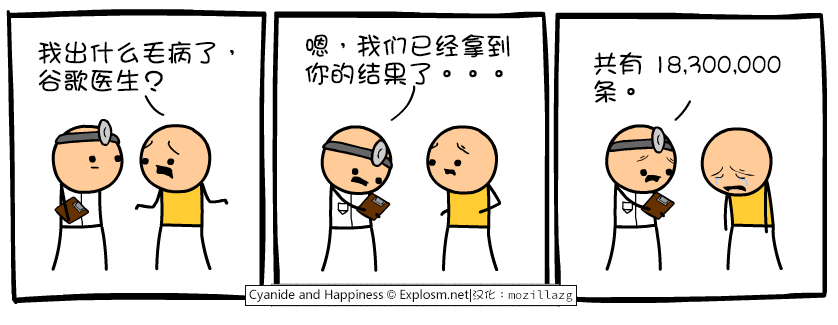
<style>
.page{position:relative;width:838px;height:325px;background:#ffffff}
.page>*{position:absolute;margin:0}
.t1{font:26px/28px "DFGirl";color:#000000}
</style>
<div class="page">
<p class="t1" style="left:38px;top:41px;width:196px;height:51px">我出什么毛病了，<br>谷歌医生？</p>
<p class="t1" style="left:305px;top:34px;width:205px;height:52px">嗯，我们已经拿到<br>你的结果了。。。</p>
<p class="t1" style="left:594px;top:52px;width:187px;height:51px">共有 18,300,000 <br>条。</p>
</div>
